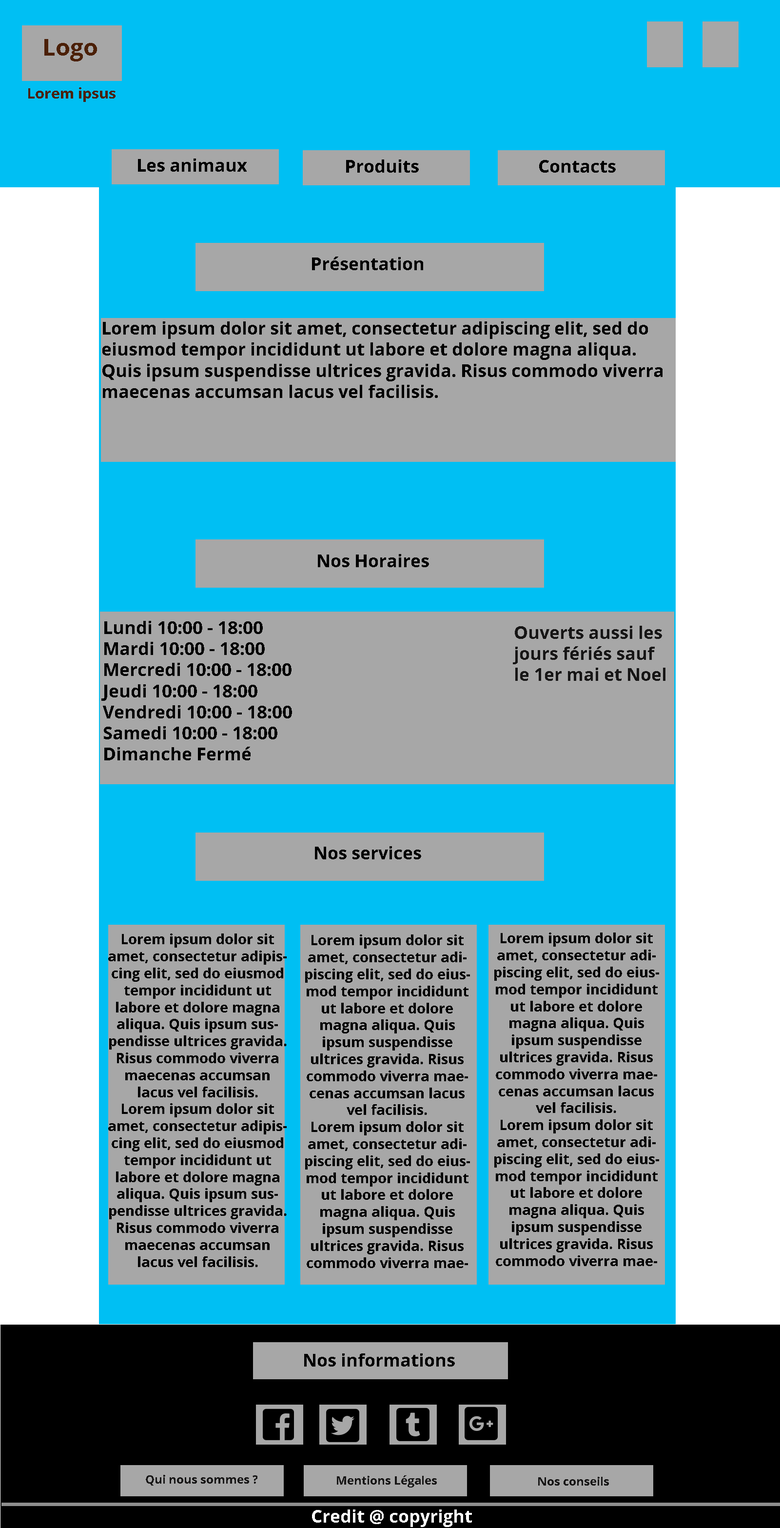
<style>
.page{position:relative;width:780px;height:1528px;background:#00bff3}
.page>*{position:absolute;margin:0}
.t1{font:23.4px "OpenSans-Bold";color:#4b2007}
.t2{font:14.6px "OpenSans-Bold";color:#4b2007}
.t3{font:17.6px "OpenSans-Bold";color:#000000}
.t4{font:17.6px "OpenSans-Bold";color:#171616}
.t5{font:14.1px "OpenSans-Bold";color:#000000}
.t6{font:11.7px "OpenSans-Bold";color:#171616}
.t7{font:17.6px "OpenSans-Bold";color:#ffffff}
</style>
<div class="page">
<p class="t1" style="left:44px;top:39px;width:53px;height:22px">Logo</p>
<p class="t2" style="left:28px;top:87px;width:88px;height:15px">Lorem ipsus</p>
<p class="t3" style="left:138px;top:159px;width:109px;height:13px">Les animaux</p>
<p class="t3" style="left:346px;top:159px;width:73px;height:14px">Produits</p>
<p class="t3" style="left:539px;top:160px;width:77px;height:13px">Contacts</p>
<p class="t3" style="left:312px;top:257px;width:111px;height:13px">Présentation</p>
<p class="t3" style="left:102px;top:321px;width:561px;height:77px">Lorem ipsum dolor sit amet, consectetur adipiscing elit, sed do eiusmod tempor incididunt ut labore et dolore magna aliqua. Quis ipsum suspendisse ultrices gravida. Risus commodo viverra maecenas accumsan lacus vel facilisis.</p>
<p class="t3" style="left:318px;top:554px;width:111px;height:13px">Nos Horaires</p>
<p class="t3" style="left:101px;top:621px;width:191px;height:139px">Lundi 10:00 - 18:00<br>Mardi 10:00 - 18:00<br>Mercredi 10:00 - 18:00<br>Jeudi 10:00 - 18:00<br>Vendredi 10:00 - 18:00<br>Samedi 10:00 - 18:00<br>Dimanche Fermé</p>
<p class="t4" style="left:513px;top:626px;width:153px;height:55px">Ouverts aussi les jours fériés sauf le 1er mai et Noel</p>
<p class="t3" style="left:315px;top:846px;width:106px;height:13px">Nos services</p>
<p class="t5" style="left:108px;top:934px;width:179px;height:333px;text-align:center">Lorem ipsum dolor sit amet, consectetur adipiscing elit, sed do eiusmod tempor incididunt ut labore et dolore magna aliqua. Quis ipsum suspendisse ultrices gravida. Risus commodo viverra maecenas accumsan lacus vel facilisis. <br>Lorem ipsum dolor sit amet, consectetur adipiscing elit, sed do eiusmod tempor incididunt ut labore et dolore magna aliqua. Quis ipsum suspendisse ultrices gravida. Risus commodo viverra maecenas accumsan lacus vel facilisis.</p>
<p class="t5" style="left:305px;top:934px;width:165px;height:334px;text-align:center">Lorem ipsum dolor sit amet, consectetur adipiscing elit, sed do eiusmod tempor incididunt ut labore et dolore magna aliqua. Quis ipsum suspendisse ultrices gravida. Risus commodo viverra maecenas accumsan lacus vel facilisis. <br>Lorem ipsum dolor sit amet, consectetur adipiscing elit, sed do eiusmod tempor incididunt ut labore et dolore magna aliqua. Quis ipsum suspendisse ultrices gravida. Risus commodo viverra maecenas accumsan lacus vel facilisis.</p>
<p class="t5" style="left:495px;top:933px;width:164px;height:333px;text-align:center">Lorem ipsum dolor sit amet, consectetur adipiscing elit, sed do eiusmod tempor incididunt ut labore et dolore magna aliqua. Quis ipsum suspendisse ultrices gravida. Risus commodo viverra maecenas accumsan lacus vel facilisis. <br>Lorem ipsum dolor sit amet, consectetur adipiscing elit, sed do eiusmod tempor incididunt ut labore et dolore magna aliqua. Quis ipsum suspendisse ultrices gravida. Risus commodo viverra maecenas accumsan lacus vel facilisis.</p>
<p class="t3" style="left:304px;top:1353px;width:151px;height:14px">Nos informations</p>
<p class="t6" style="left:146px;top:1475px;width:112px;height:11px">Qui nous sommes ?</p>
<p class="t6" style="left:337px;top:1475px;width:100px;height:13px">Mentions Légales</p>
<p class="t6" style="left:538px;top:1477px;width:71px;height:9px">Nos conseils</p>
<p class="t7" style="left:312px;top:1510px;width:160px;height:17px">Credit @ copyright</p>
</div>
